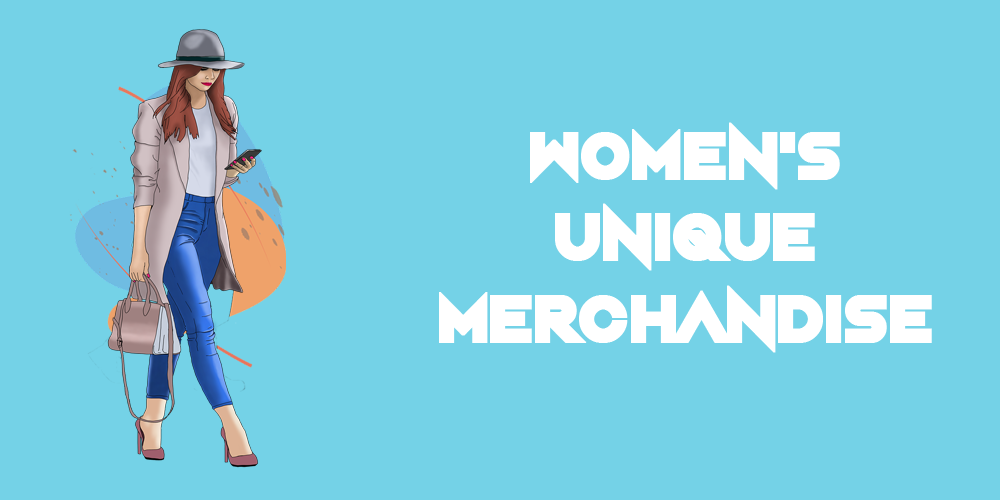
<style>
.page{position:relative;width:1000px;height:500px;background:#74d2e7}
.page>*{position:absolute;margin:0}
.t1{font:67.7px "NightMachine";color:#ffffff;font-weight:bold}
</style>
<div class="page">
<p class="t1" style="left:439px;top:122px;width:493px;height:231px;text-align:center">WoMen's<br>Unique<br>Merchandise</p>
</div>
